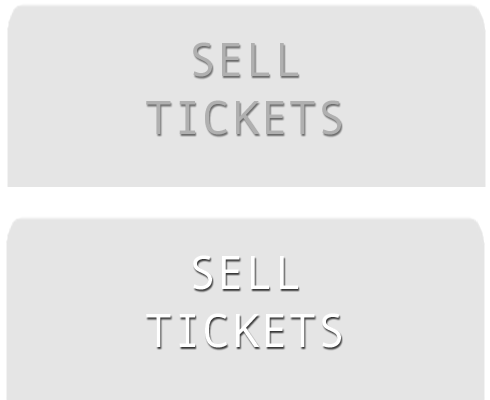
<style>
.page{position:relative;width:490px;height:400px;background:#e5e5e5}
.page>*{position:absolute;margin:0}
.t1{font:48px "AndaleMono";color:#999999}
</style>
<div class="page">
<p class="t1" style="left:146px;top:42px;width:195px;height:93px;text-align:center;opacity:0.7">SELL<br>TICKETS</p>
</div>
